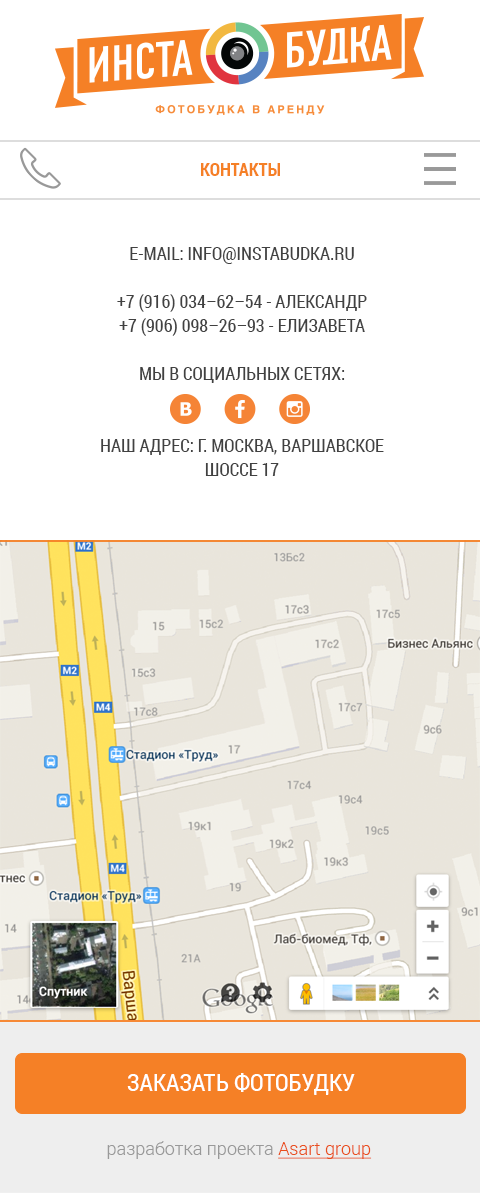
<style>
.page{position:relative;width:480px;height:1193px;background:#ffffff}
.page>*{position:absolute;margin:0}
.t1{font:18px "RobotoCondensed-Bold";color:#f58026;text-transform:uppercase}
.t2{font:18px/24px "RobotoCondensed-Regular";color:#414141;text-transform:uppercase}
.t3{font:24px "RobotoCondensed-Regular";color:#ffffff;text-transform:uppercase}
.t4{font:18px "Roboto-Light";color:#999999}
.t5{font:18px "Roboto-Light";color:#e94e1b;text-decoration:underline}
</style>
<div class="page">
<p class="t1" style="left:201px;top:163px;width:79px;height:13px">контакты</p>
<p class="t2" style="left:101px;top:247px;width:283px;height:229px;text-align:center">E-mail: info@instabudka.ru<br><br>+7 (916) 034–62–54 - Александр<br>+7 (906) 098–26–93 - Елизавета<br><br>Мы в социальных сетях: <br><br><br>Наш адрес: г. Москва, Варшавское шоссе 17</p>
<p class="t3" style="left:127px;top:1073px;width:228px;height:22px">заказать фотобудку</p>
<p class="t4" style="left:107px;top:1141px;width:265px;height:18px">разработка проекта <span class="t5">Asart group</span></p>
</div>
